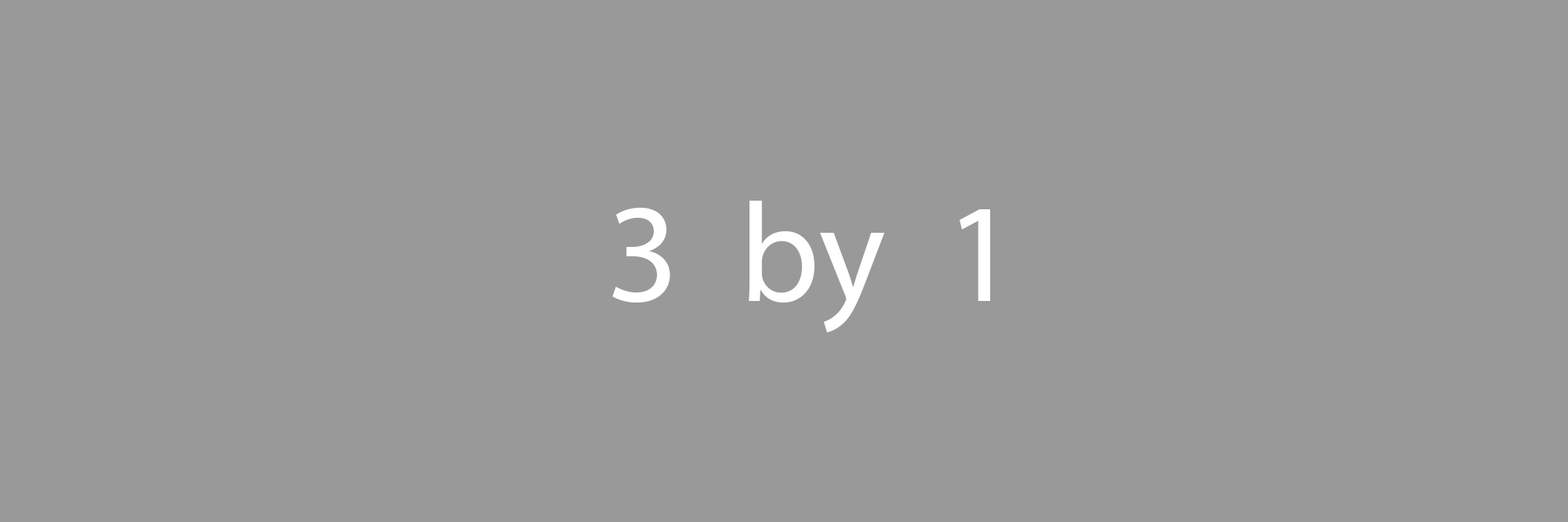
<style>
.page{position:relative;width:1568px;height:522px;background:#999999}
.page>*{position:absolute;margin:0}
.t1{font:141.1px "MyriadPro-Regular";color:#ffffff}
</style>
<div class="page">
<p class="t1" style="left:612px;top:201px;width:378px;height:131px">3  by  1</p>
</div>
